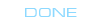
<style>
.page{position:relative;width:100px;height:25px;background:#ffffff}
.page>*{position:absolute;margin:0}
.t1{font:14px "MicrogrammaD-MediExte";letter-spacing:0.075em;color:#8dd9ff;text-transform:uppercase}
</style>
<div class="page">
<p class="t1" style="left:25px;top:8px;width:52px;height:9px">Done</p>
</div>
